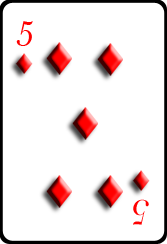
<style>
.page{position:relative;width:167px;height:244px;background:#ffffff}
.page>*{position:absolute;margin:0}
.t1{font:37px "BaskOldFace";color:#ff0000}
</style>
<div class="page">
<p class="t1" style="left:16px;top:21px;width:17px;height:25px">5</p>
<p class="t1" style="left:133px;top:199px;width:16px;height:26px;rotate:-180deg">5</p>
</div>
